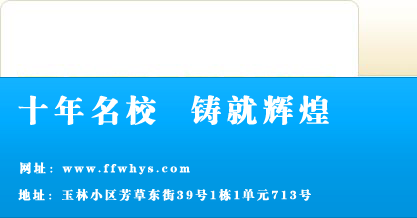
<style>
.page{position:relative;width:417px;height:218px;background:#ffffff}
.page>*{position:absolute;margin:0}
.t1{font:30px "FZCSJW--GB1-0";letter-spacing:0.2em;color:#ffffff}
.t2{font:12px "FZCSJW--GB1-0";letter-spacing:0.2em;color:#ffffff}
</style>
<div class="page">
<p class="t1" style="left:18px;top:95px;width:311px;height:30px">十年名校  铸就辉煌</p>
<p class="t2" style="left:20px;top:162px;width:170px;height:13px">网址：www.ffwhys.com</p>
<p class="t2" style="left:18px;top:188px;width:293px;height:13px">地址：玉林小区芳草东街39号1栋1单元713号</p>
</div>
